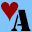
<style>
.page{position:relative;width:32px;height:32px;background:#80c4fc}
.page>*{position:absolute;margin:0}
.t1{font:32px "TimesNewRomanPSMT";color:#940000}
.t2{font:32px "Stencil";color:#000000}
</style>
<div class="page">
<p class="t1" style="left:1px;top:2px;width:18px;height:20px">♥</p>
<p class="t2" style="left:11px;top:9px;width:20px;height:22px">A</p>
</div>
